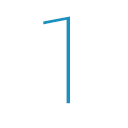
<style>
.page{position:relative;width:128px;height:128px;background:#ffffff}
.page>*{position:absolute;margin:0}
.t1{font:120px "Roboto-Thin";color:#1892bf}
</style>
<div class="page">
<p class="t1" style="left:43px;top:16px;width:27px;height:88px">1</p>
</div>
